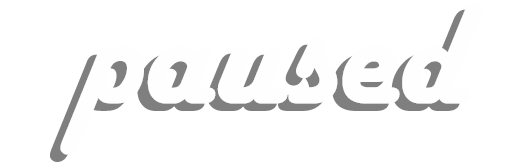
<style>
.page{position:relative;width:523px;height:166px;background:#ffffff}
.page>*{position:absolute;margin:0}
.t1{font:150px "HarlowSolid"}
</style>
<div class="page">
<p class="t1" style="left:50px;top:9px;width:423px;height:153px">paused</p>
</div>
